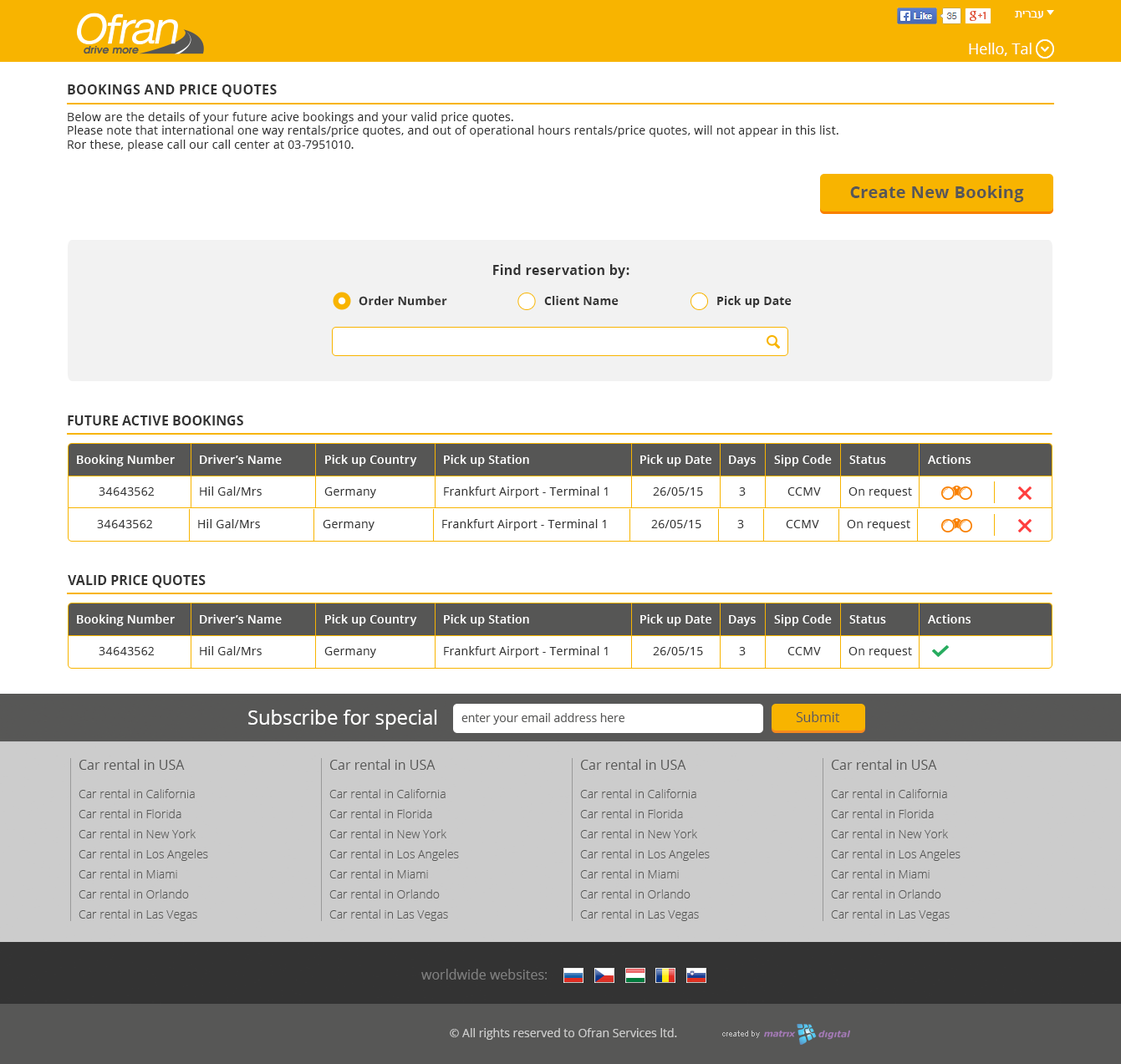
<style>
.page{position:relative;width:1121px;height:1064px;background:#ffffff}
.page>*{position:absolute;margin:0}
.t1{font:11.7px "ArialMT";color:#ffffff;text-transform:uppercase}
.t2{font:15px "OpenSans";color:#ffffff}
.t3{font:13.4px "OpenSans-Bold";letter-spacing:0.02em;color:#333333;text-transform:uppercase}
.t4{font:11.7px "OpenSans";letter-spacing:0.02em;color:#333333}
.t5{font:16.7px "OpenSans-Bold";letter-spacing:0.02em;color:#575756}
.t6{font:13.4px "OpenSans-Bold";letter-spacing:0.02em;color:#333333}
.t7{font:11.7px "OpenSans-Bold";letter-spacing:0.02em;color:#333333}
.t8{font:13.4px "OpenSans-Bold";color:#333333;text-transform:uppercase}
.t9{font:11.7px "OpenSans-Semibold";letter-spacing:0.02em;color:#ffffff}
.t10{font:20.1px "OpenSans";color:#ffffff}
.t11{font:11.7px "OpenSans";color:#575756}
.t12{font:13.4px "OpenSans";color:#575756}
.t13{font:11.7px/20.1px "OpenSans-Light";color:#575756}
.t14{font:13.4px/24.4px "OpenSans";color:#575756}
.t15{font:13.4px "OpenSans";color:#808080}
.t16{font:11.7px "OpenSans";color:#cccccc}
</style>
<div class="page">
<p class="t1" style="left:1015px;top:11px;width:28px;height:7px">עברית</p>
<p class="t2" style="left:969px;top:43px;width:62px;height:13px">Hello, Tal</p>
<p class="t3" style="left:68px;top:84px;width:209px;height:13px">bookings and price quotes</p>
<p class="t4" style="left:68px;top:112px;width:770px;height:39px">Below are the details of your future acive bookings and your valid price quotes.<br>Please note that international one way rentals/price quotes, and out of operational hours rentals/price quotes, will not appear in this list. <br>Ror these, please call our call center at 03-7951010.</p>
<p class="t5" style="left:850px;top:186px;width:174px;height:16px">Create New Booking</p>
<p class="t6" style="left:493px;top:264px;width:136px;height:14px">Find reservation by:</p>
<p class="t7" style="left:359px;top:296px;width:88px;height:10px">Order Number</p>
<p class="t7" style="left:544px;top:296px;width:74px;height:9px">Client Name</p>
<p class="t7" style="left:717px;top:296px;width:74px;height:12px">Pick up Date</p>
<p class="t8" style="left:68px;top:415px;width:175px;height:10px">future active bookings</p>
<p class="t9" style="left:77px;top:455px;width:98px;height:11px">Booking Number</p>
<p class="t9" style="left:200px;top:455px;width:82px;height:9px">Driver’s Name</p>
<p class="t9" style="left:325px;top:455px;width:92px;height:11px">Pick up Country</p>
<p class="t9" style="left:444px;top:455px;width:85px;height:11px">Pick up Station</p>
<p class="t9" style="left:640px;top:455px;width:71px;height:11px">Pick up Date</p>
<p class="t9" style="left:729px;top:455px;width:27px;height:11px">Days</p>
<p class="t9" style="left:774px;top:455px;width:58px;height:11px">Sipp Code</p>
<p class="t9" style="left:849px;top:455px;width:37px;height:9px">Status</p>
<p class="t9" style="left:928px;top:455px;width:42px;height:9px">Actions</p>
<p class="t4" style="left:99px;top:487px;width:56px;height:9px">34643562</p>
<p class="t4" style="left:200px;top:486px;width:62px;height:10px">Hil Gal/Mrs</p>
<p class="t4" style="left:324px;top:487px;width:52px;height:11px">Germany</p>
<p class="t4" style="left:444px;top:486px;width:164px;height:12px">Frankfurt Airport - Terminal 1</p>
<p class="t4" style="left:653px;top:487px;width:50px;height:9px">26/05/15</p>
<p class="t4" style="left:739px;top:487px;width:7px;height:9px">3</p>
<p class="t4" style="left:787px;top:487px;width:34px;height:9px">CCMV</p>
<p class="t4" style="left:848px;top:487px;width:64px;height:11px">On request</p>
<p class="t4" style="left:97px;top:520px;width:56px;height:8px">34643562</p>
<p class="t4" style="left:198px;top:519px;width:62px;height:9px">Hil Gal/Mrs</p>
<p class="t4" style="left:323px;top:520px;width:51px;height:11px">Germany</p>
<p class="t4" style="left:442px;top:519px;width:164px;height:12px">Frankfurt Airport - Terminal 1</p>
<p class="t4" style="left:651px;top:520px;width:50px;height:8px">26/05/15</p>
<p class="t4" style="left:737px;top:520px;width:7px;height:8px">3</p>
<p class="t4" style="left:786px;top:520px;width:33px;height:8px">CCMV</p>
<p class="t4" style="left:847px;top:520px;width:63px;height:11px">On request</p>
<p class="t8" style="left:68px;top:575px;width:138px;height:13px">valid price quotes</p>
<p class="t9" style="left:77px;top:614px;width:98px;height:12px">Booking Number</p>
<p class="t9" style="left:200px;top:614px;width:82px;height:9px">Driver’s Name</p>
<p class="t9" style="left:325px;top:614px;width:92px;height:12px">Pick up Country</p>
<p class="t9" style="left:444px;top:614px;width:85px;height:12px">Pick up Station</p>
<p class="t9" style="left:640px;top:614px;width:71px;height:12px">Pick up Date</p>
<p class="t9" style="left:729px;top:615px;width:27px;height:11px">Days</p>
<p class="t9" style="left:774px;top:614px;width:58px;height:12px">Sipp Code</p>
<p class="t9" style="left:849px;top:615px;width:37px;height:8px">Status</p>
<p class="t9" style="left:928px;top:614px;width:42px;height:9px">Actions</p>
<p class="t4" style="left:99px;top:647px;width:56px;height:8px">34643562</p>
<p class="t4" style="left:200px;top:646px;width:62px;height:9px">Hil Gal/Mrs</p>
<p class="t4" style="left:324px;top:647px;width:52px;height:11px">Germany</p>
<p class="t4" style="left:444px;top:646px;width:164px;height:12px">Frankfurt Airport - Terminal 1</p>
<p class="t4" style="left:653px;top:647px;width:50px;height:8px">26/05/15</p>
<p class="t4" style="left:739px;top:647px;width:7px;height:8px">3</p>
<p class="t4" style="left:787px;top:647px;width:34px;height:8px">CCMV</p>
<p class="t4" style="left:848px;top:647px;width:64px;height:11px">On request</p>
<p class="t10" style="left:248px;top:710px;width:189px;height:20px">Subscribe for special offers</p>
<p class="t11" style="left:461px;top:713px;width:163px;height:12px">enter your email address here</p>
<p class="t12" style="left:796px;top:711px;width:44px;height:11px">Submit</p>
<p class="t13" style="left:79px;top:759px;width:129px;height:162px;text-align:right"><span class="t14">Car rental in USA<br></span>Car rental in California<br>Car rental in Florida<br>Car rental in New York<br>Car rental in Los Angeles<br>Car rental in Miami<br>Car rental in Orlando<br>Car rental in Las Vegas</p>
<p class="t13" style="left:329px;top:759px;width:130px;height:162px;text-align:right"><span class="t14">Car rental in USA<br></span>Car rental in California<br>Car rental in Florida<br>Car rental in New York<br>Car rental in Los Angeles<br>Car rental in Miami<br>Car rental in Orlando<br>Car rental in Las Vegas</p>
<p class="t13" style="left:580px;top:759px;width:130px;height:162px;text-align:right"><span class="t14">Car rental in USA<br></span>Car rental in California<br>Car rental in Florida<br>Car rental in New York<br>Car rental in Los Angeles<br>Car rental in Miami<br>Car rental in Orlando<br>Car rental in Las Vegas</p>
<p class="t13" style="left:831px;top:759px;width:129px;height:162px;text-align:right"><span class="t14">Car rental in USA<br></span>Car rental in California<br>Car rental in Florida<br>Car rental in New York<br>Car rental in Los Angeles<br>Car rental in Miami<br>Car rental in Orlando<br>Car rental in Las Vegas</p>
<p class="t15" style="left:421px;top:969px;width:126px;height:11px">worldwide websites:</p>
<p class="t16" style="left:450px;top:1028px;width:227px;height:12px">© All rights reserved to Ofran Services ltd.</p>
</div>
